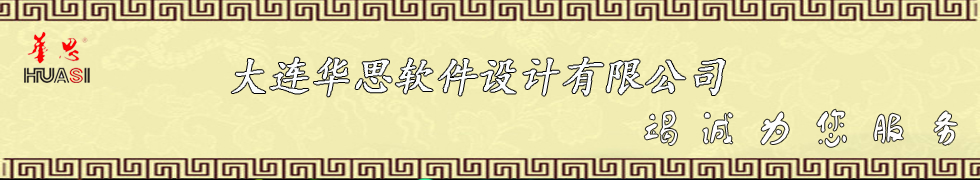
<style>
.page{position:relative;width:980px;height:180px}
.page>*{position:absolute;margin:0}
.t1{font:41.7px "¿¬Ìå";color:#fafcfd;font-weight:bold;font-style:italic}
.t2{font:37.5px "FZZJ-TTMBFONT";letter-spacing:0.52em;color:#fefdfd}
</style>
<div class="page">
<p class="t1" style="left:231px;top:57px;width:494px;height:40px">大连华思软件设计有限公司</p>
<p class="t2" style="left:644px;top:109px;width:313px;height:38px">竭诚为您服务</p>
</div>
